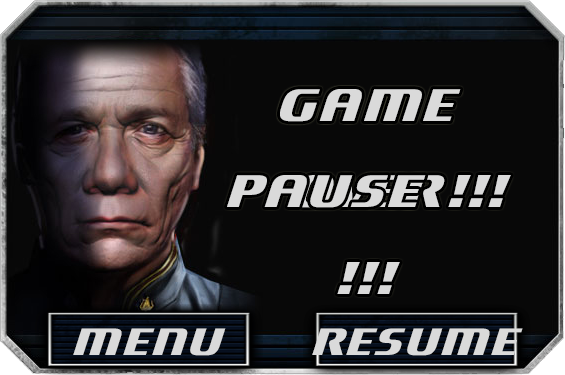
<style>
.page{position:relative;width:565px;height:375px;background:#080808}
.page>*{position:absolute;margin:0}
.t1{font:72px "Motorwerk";letter-spacing:0.025em;color:#dadada}
.t2{font:60px "Motorwerk";letter-spacing:0.025em;color:#dadada}
</style>
<div class="page">
<p class="t1" style="left:227px;top:89px;width:284px;height:119px;text-align:center">Game<br>PAUSE !!!</p>
<p class="t1" style="left:280px;top:89px;width:181px;height:205px;text-align:center">game<br>over<br>!!!</p>
<p class="t2" style="left:73px;top:328px;width:153px;height:28px">menu</p>
<p class="t2" style="left:73px;top:328px;width:153px;height:28px">menu</p>
<p class="t2" style="left:312px;top:328px;width:211px;height:28px">RESUME</p>
</div>
